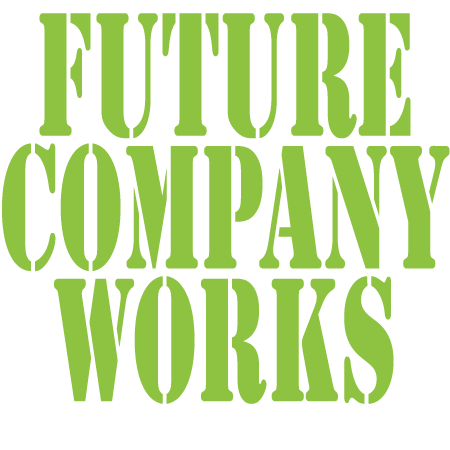
<style>
.page{position:relative;width:450px;height:450px;background:#ffffff}
.page>*{position:absolute;margin:0}
.t1{font:163.7px/132.7px "StencilStd";color:#8ec342;scale:0.55 1}
</style>
<div class="page">
<p class="t1" style="left:2px;top:13px;width:448px;height:391px;text-align:center">Future<br>Company<br>Works</p>
</div>
